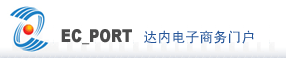
<style>
.page{position:relative;width:286px;height:58px;background:#ffffff}
.page>*{position:absolute;margin:0}
.t1{font:17.7px "Arial-Black";color:#4b4b4b;scale:0.8 1}
.t2{font:14px "SimHei";color:#255599}
</style>
<div class="page">
<p class="t1" style="left:61px;top:29px;width:71px;height:16px">EC_PORT</p>
<p class="t2" style="left:144px;top:30px;width:110px;height:14px">达内电子商务门户</p>
</div>
